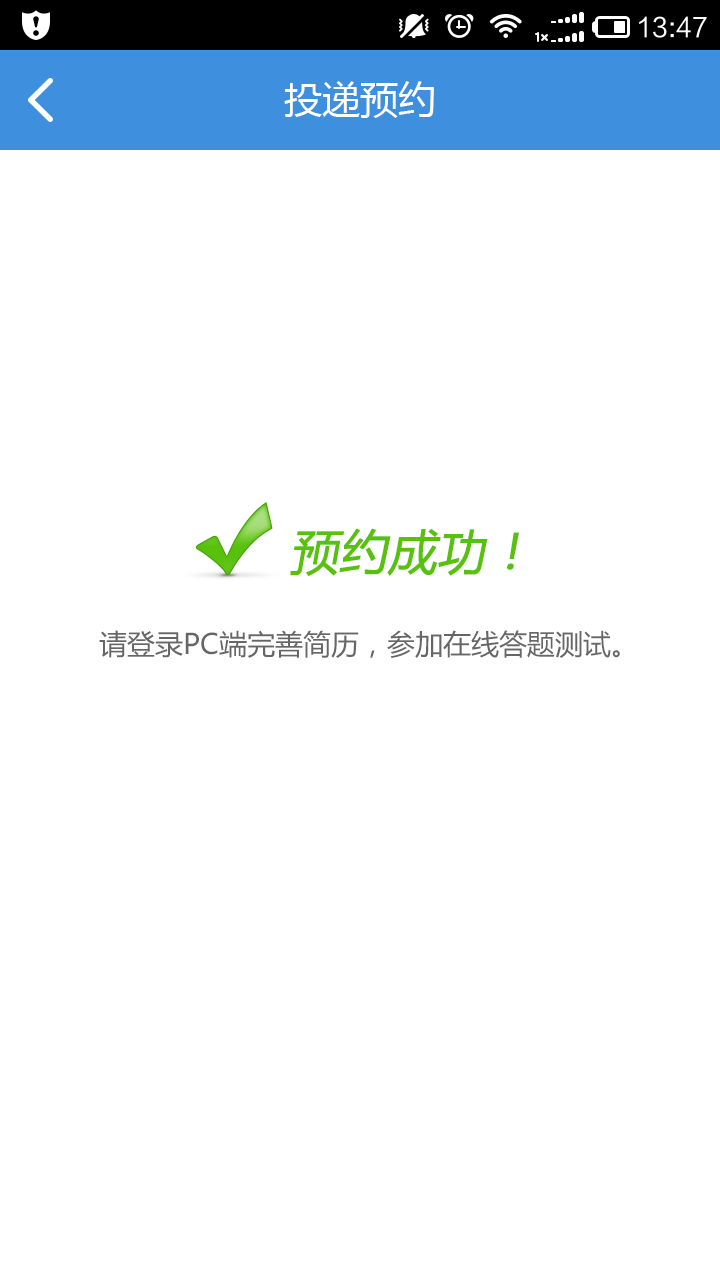
<style>
.page{position:relative;width:720px;height:1280px;background:#ffffff}
.page>*{position:absolute;margin:0}
.t1{font:38px "MicrosoftYaHei";color:#ffffff}
.t2{font:48px "MicrosoftYaHei";color:#58c10c;font-weight:bold;font-style:italic}
.t3{font:28px "MicrosoftYaHei";color:#666666}
</style>
<div class="page">
<p class="t1" style="left:284px;top:81px;width:150px;height:37px">投递预约</p>
<p class="t2" style="left:290px;top:528px;width:229px;height:48px">预约成功！</p>
<p class="t3" style="left:99px;top:630px;width:521px;height:28px">请登录PC端完善简历，参加在线答题测试。</p>
</div>
